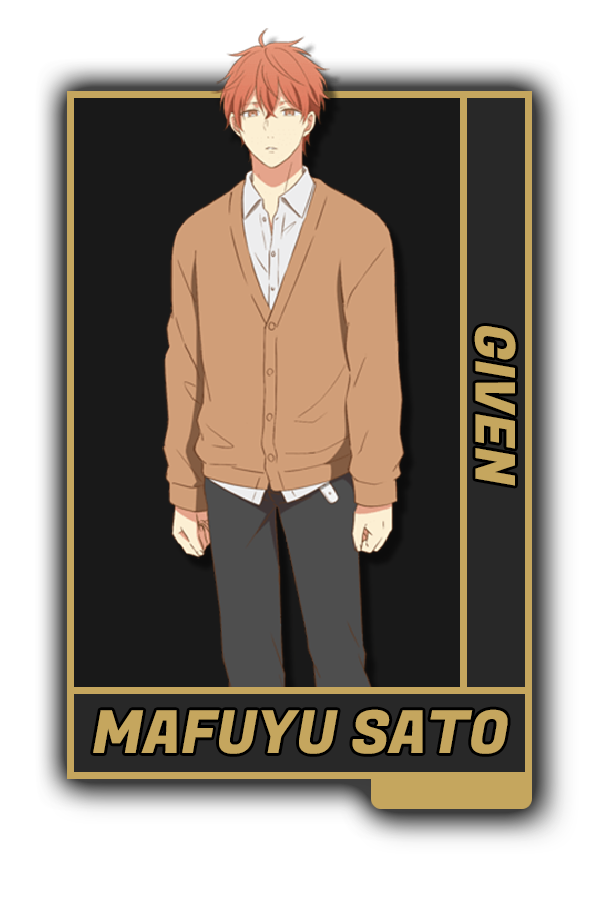
<style>
.page{position:relative;width:600px;height:900px;background:#ffffff}
.page>*{position:absolute;margin:0}
.t1{font:54.9px "FugazOne-Regular";color:#c5a65e}
.t2{font:59.4px "FugazOne-Regular";color:#c5a65e}
</style>
<div class="page">
<p class="t1" style="left:474px;top:326px;width:42px;height:160px;rotate:90deg">GIVEN</p>
<p class="t2" style="left:93px;top:709px;width:415px;height:45px">MAFUYU SATO</p>
</div>
